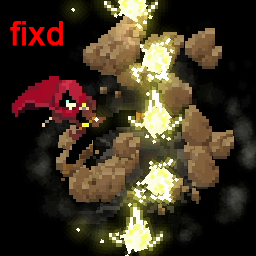
<style>
.page{position:relative;width:256px;height:256px;background:#000000}
.page>*{position:absolute;margin:0}
.t1{font:33.2px "ArialMT";color:#ff0000;font-weight:bold}
</style>
<div class="page">
<p class="t1" style="left:10px;top:21px;width:53px;height:25px">fixd</p>
</div>
